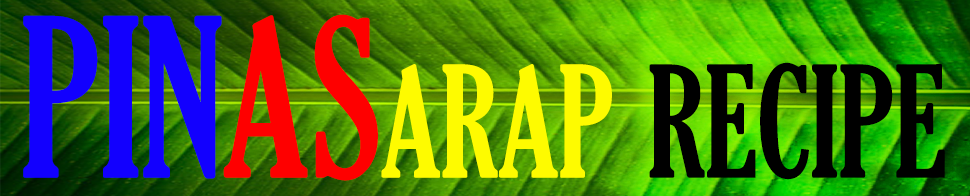
<style>
.page{position:relative;width:970px;height:196px}
.page>*{position:absolute;margin:0}
.t1{font:212.9px "GloucesterMT-ExtraCondensed";letter-spacing:-0.005em;color:#000000;font-variant:small-caps;scale:0.94 1}
.t2{font:212.9px "GloucesterMT-ExtraCondensed";letter-spacing:-0.005em;color:#1200fe;font-variant:small-caps;scale:0.94 1}
.t3{font:212.9px "GloucesterMT-ExtraCondensed";letter-spacing:-0.005em;color:#fe0000;font-variant:small-caps;scale:0.94 1}
.t4{font:212.9px "GloucesterMT-ExtraCondensed";letter-spacing:-0.005em;color:#fefb00;font-variant:small-caps;scale:0.94 1}
</style>
<div class="page">
<p class="t1" style="left:23px;top:14px;width:922px;height:167px"><span class="t2">PIN</span><span class="t3">AS</span><span class="t4">arap </span>recipe</p>
</div>
